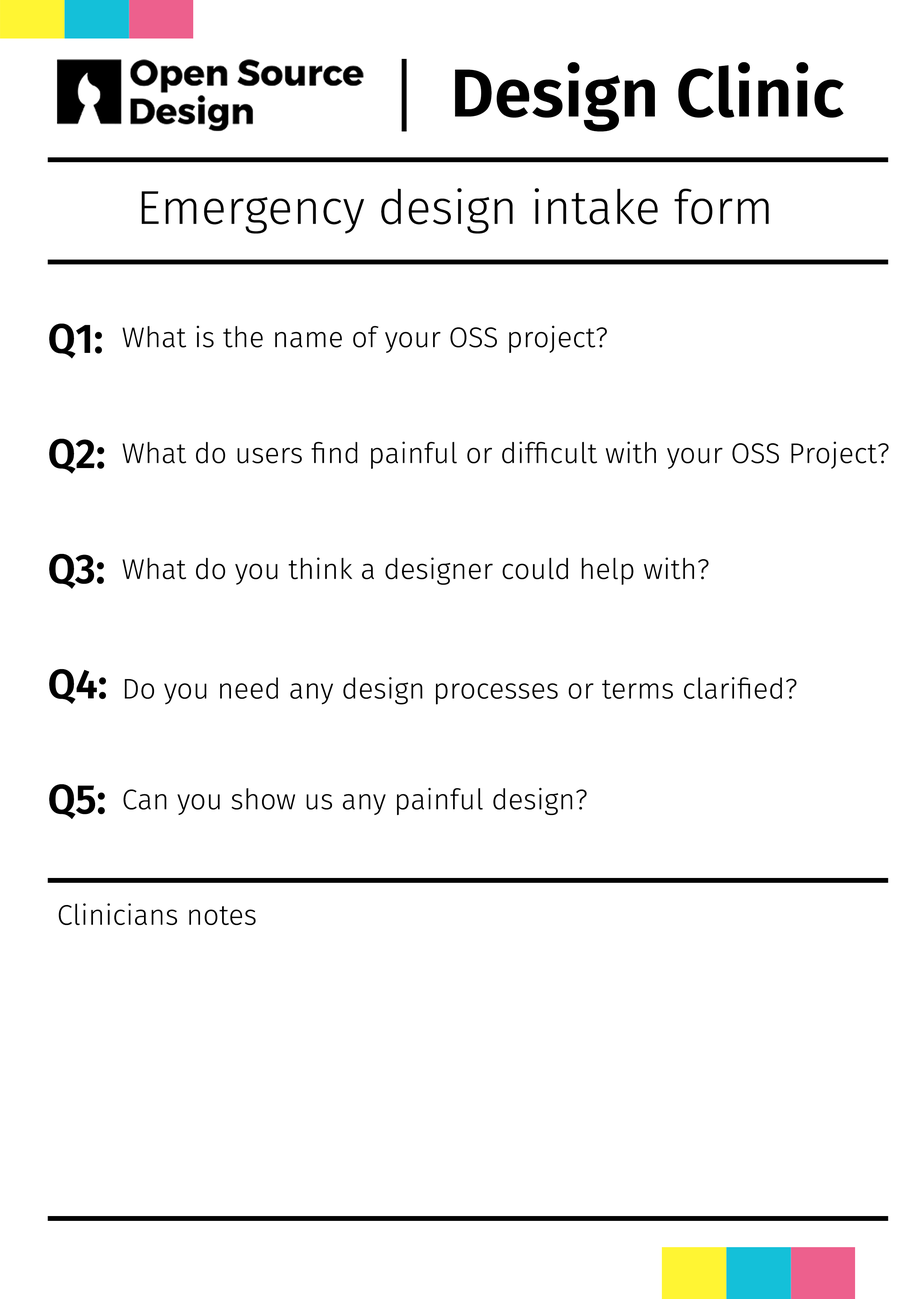
<style>
.page{position:relative;width:918px;height:1299px;background:#ffffff}
.page>*{position:absolute;margin:0}
.t1{font:67.8px "FiraSans-SemiBold";color:#000000}
.t2{font:47.3px "FiraSans-Light";color:#000000}
.t3{font:41.4px "FiraSans-SemiBold";color:#000000;scale:0.97 1}
.t4{font:28.4px "FiraSans-Light";color:#000000}
</style>
<div class="page">
<p class="t1" style="left:455px;top:62px;width:389px;height:69px">Design Clinic</p>
<p class="t2" style="left:142px;top:188px;width:627px;height:46px">Emergency design intake form</p>
<p class="t3" style="left:49px;top:323px;width:53px;height:36px">Q1:</p>
<p class="t4" style="left:123px;top:325px;width:484px;height:28px">What is the name of your OSS project?</p>
<p class="t3" style="left:49px;top:438px;width:55px;height:36px">Q2:</p>
<p class="t4" style="left:123px;top:441px;width:766px;height:28px">What do users find painful or difficult with your OSS Project?</p>
<p class="t3" style="left:49px;top:553px;width:55px;height:36px">Q3:</p>
<p class="t4" style="left:123px;top:557px;width:586px;height:28px">What do you think a designer could help with?</p>
<p class="t3" style="left:49px;top:669px;width:57px;height:35px">Q4:</p>
<p class="t4" style="left:125px;top:677px;width:672px;height:28px">Do you need any design processes or terms clarified?</p>
<p class="t3" style="left:49px;top:784px;width:56px;height:35px">Q5:</p>
<p class="t4" style="left:123px;top:787px;width:464px;height:28px">Can you show us any painful design?</p>
<p class="t4" style="left:58px;top:903px;width:198px;height:22px">Clinicians notes</p>
</div>
